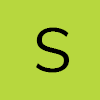
<style>
.page{position:relative;width:100px;height:100px;background:#b7d73e}
.page>*{position:absolute;margin:0}
.t1{font:62.5px "Muli-Regular";color:#000000}
</style>
<div class="page">
<p class="t1" style="left:36px;top:27px;width:34px;height:46px">S</p>
</div>
